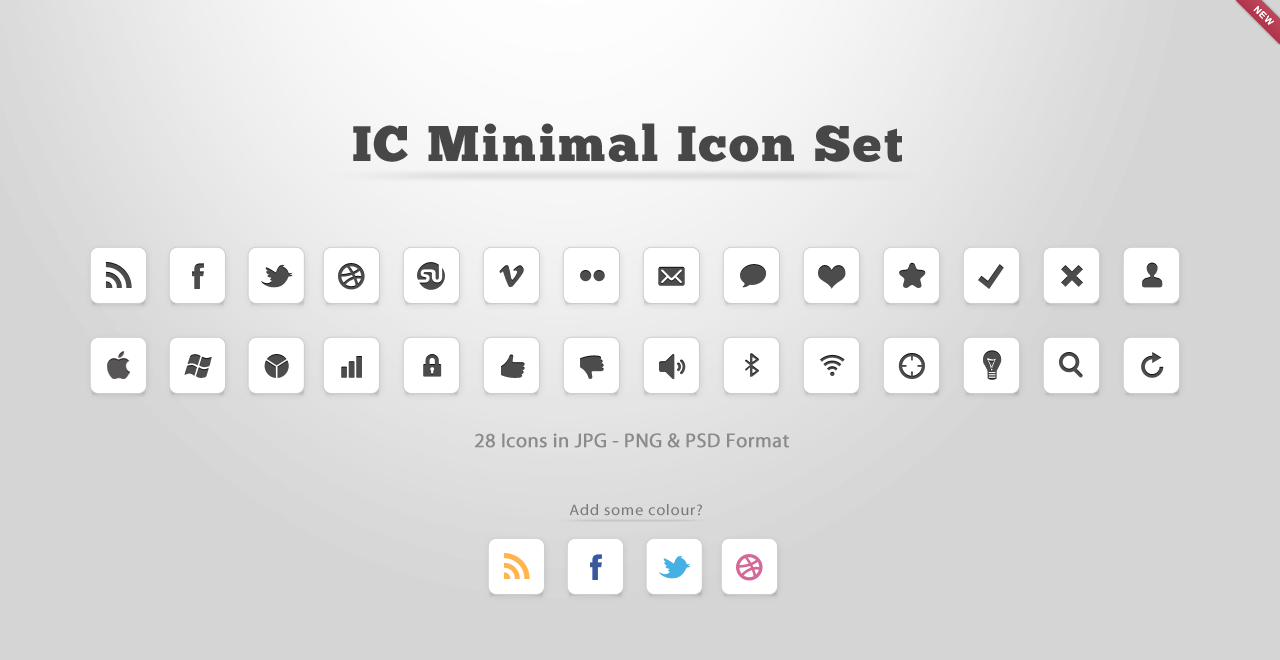
<style>
.page{position:relative;width:1280px;height:660px;background:#d5d5d5}
.page>*{position:absolute;margin:0}
.t1{font:49.9px "ChunkFive";letter-spacing:0.055em;color:#474747;scale:1.04 1}
.t2{font:20px "MyriadPro-Regular";letter-spacing:0.005em;color:#8b8b8b;font-weight:bold}
.t3{font:15.4px "MyriadPro-Regular";letter-spacing:0.055em;color:#787878;scale:1.04 1}
</style>
<div class="page">
<p class="t1" style="left:353px;top:123px;width:549px;height:39px">IC Minimal Icon Set</p>
<p class="t2" style="left:475px;top:433px;width:314px;height:15px">28 Icons in JPG - PNG &amp; PSD Format</p>
<p class="t3" style="left:569px;top:504px;width:133px;height:12px">Add some colour?</p>
</div>
